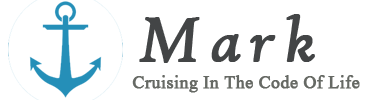
<style>
.page{position:relative;width:370px;height:100px;background:#ffffff}
.page>*{position:absolute;margin:0}
.t1{font:67px "HighTowerText-Italic";letter-spacing:0.12em;color:#434546;font-weight:bold}
.t2{font:22px "Aparajita";color:#666964;font-weight:bold}
</style>
<div class="page">
<p class="t1" style="left:139px;top:14px;width:176px;height:49px">Mark</p>
<p class="t2" style="left:132px;top:75px;width:228px;height:18px">Cruising In The Code Of Life</p>
</div>
